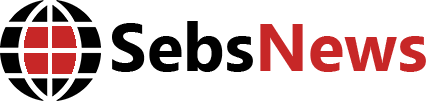
<style>
.page{position:relative;width:435px;height:101px;background:#ffffff}
.page>*{position:absolute;margin:0}
.t1{font:67.4px "Ebrima-Bold";color:#000000}
.t2{font:67.4px "Ebrima-Bold";color:#c72727}
</style>
<div class="page">
<p class="t1" style="left:112px;top:21px;width:314px;height:51px">Sebs<span class="t2">News</span></p>
</div>
